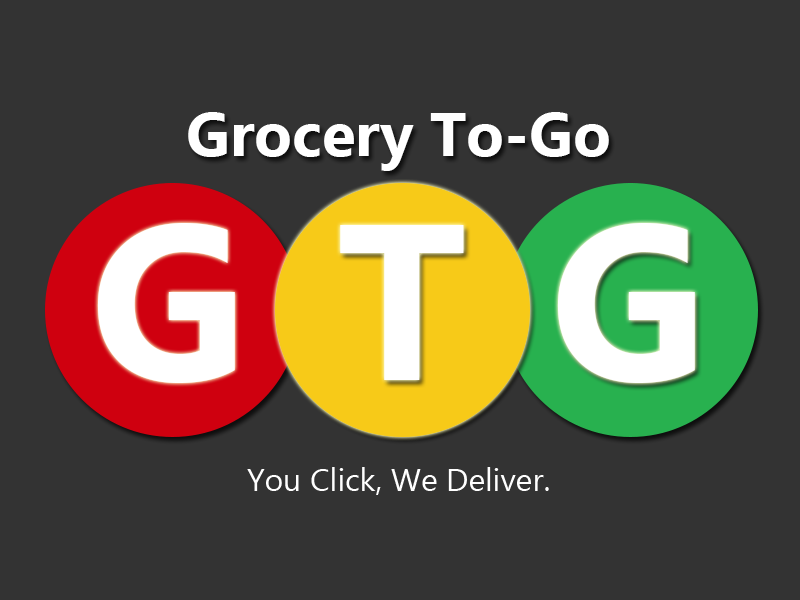
<style>
.page{position:relative;width:800px;height:600px;background:#333333}
.page>*{position:absolute;margin:0}
.t1{font:61.8px "Ebrima-Bold";color:#ffffff}
.t2{font:221.3px "Ebrima-Bold";color:#ffffff}
.t3{font:31.8px "Ebrima";color:#ffffff}
</style>
<div class="page">
<p class="t1" style="left:188px;top:112px;width:421px;height:59px">Grocery To-Go</p>
<p class="t2" style="left:97px;top:223px;width:138px;height:160px">G</p>
<p class="t2" style="left:340px;top:225px;width:124px;height:155px">T</p>
<p class="t2" style="left:557px;top:223px;width:138px;height:160px">G</p>
<p class="t3" style="left:247px;top:467px;width:302px;height:28px">.You Click, We Deliver</p>
</div>
